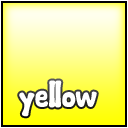
<style>
.page{position:relative;width:128px;height:128px}
.page>*{position:absolute;margin:0}
.t1{font:36px "ChubbyCheeks";color:#ffffff}
</style>
<div class="page">
<p class="t1" style="left:19px;top:80px;width:78px;height:37px">yellow</p>
</div>
